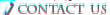
<style>
.page{position:relative;width:110px;height:15px;background:#ffffff}
.page>*{position:absolute;margin:0}
.t1{font:12px "CharlemagneStd-Bold"}
</style>
<div class="page">
<p class="t1" style="left:18px;top:2px;width:89px;height:11px">Contact  us</p>
</div>
